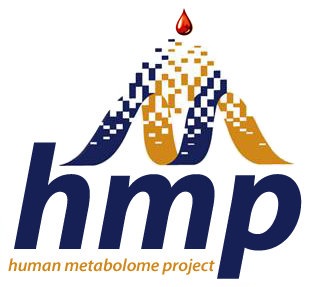
<style>
.page{position:relative;width:312px;height:287px;background:#ffffff}
.page>*{position:absolute;margin:0}
.t1{font:17.7px "MyriadPro-SemiboldIt";color:#cf8719}
</style>
<div class="page">
<p class="t1" style="left:8px;top:258px;width:207px;height:17px">human metabolome project</p>
</div>
